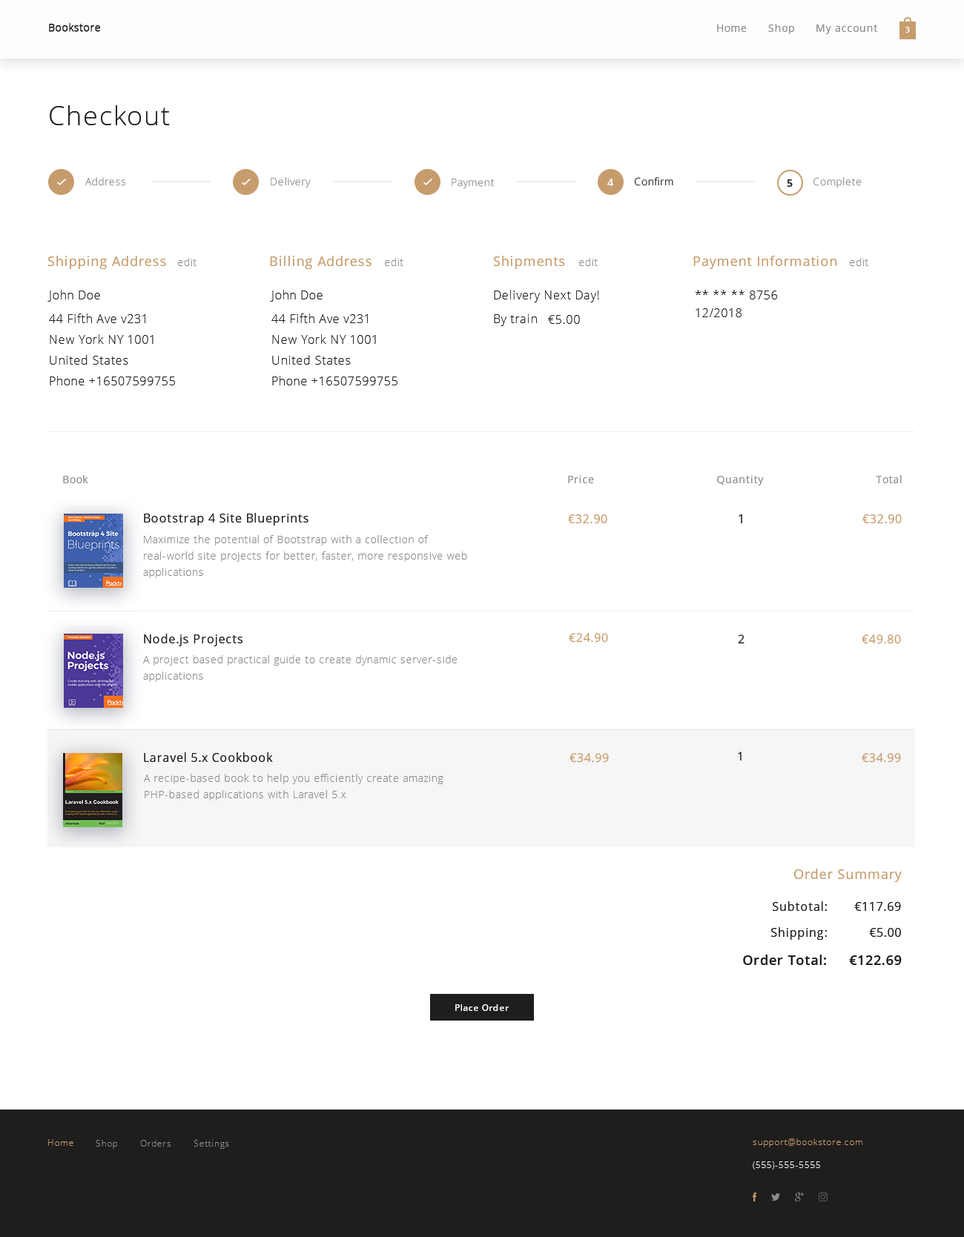
<style>
.page{position:relative;width:964px;height:1237px;background:#ffffff}
.page>*{position:absolute;margin:0}
.t1{font:26.7px "OpenSans-Light";letter-spacing:0.05em;color:#1e1e1c}
.t2{font:10.3px "OpenSans-Light";letter-spacing:0.05em;color:#8c8c8c}
.t3{font:10.4px "OpenSans-Light";letter-spacing:0.05em;color:#8c8c8c}
.t4{font:10.4px "OpenSans-Semibold";letter-spacing:0.05em;color:#fefefc}
.t5{font:10.4px "OpenSans-Light";letter-spacing:0.05em;color:#1e1e1c}
.t6{font:10.4px "OpenSans-Semibold";letter-spacing:0.05em;color:#1e1e1c}
.t7{font:13.3px "OpenSans";letter-spacing:0.05em;color:#c69c6d}
.t8{font:11.9px/20.8px "OpenSans-Light";letter-spacing:0.05em;color:#1e1e1c}
.t9{font:11.9px/23.7px "OpenSans-Light";letter-spacing:0.05em;color:#1e1e1c}
.t10{font:11.9px/17.8px "OpenSans-Light";letter-spacing:0.05em;color:#1e1e1c}
.t11{font:11.9px "OpenSans-Light";letter-spacing:0.05em;color:#1e1e1c}
.t12{font:10.4px "OpenSans";letter-spacing:0.05em;color:#8c8c8c}
.t13{font:11.9px "OpenSans";letter-spacing:0.05em;color:#1e1e1c}
.t14{font:11.9px "OpenSans";letter-spacing:0.05em;color:#c69c6d}
.t15{font:10.4px/16.3px "OpenSans-Light";letter-spacing:0.05em;color:#8c8c8c}
.t16{font:11.8px "OpenSans";letter-spacing:0.05em;color:#c69c6d}
.t17{font:13.3px "OpenSans-Semibold";letter-spacing:0.05em;color:#1e1e1c}
.t18{font:8.9px "OpenSans-Semibold";letter-spacing:0.05em;color:#fffefe}
</style>
<div class="page">
<p class="t1" style="left:50px;top:105px;width:120px;height:20px">Checkout</p>
<p class="t2" style="left:85px;top:177px;width:41px;height:9px">Address</p>
<p class="t3" style="left:271px;top:177px;width:40px;height:11px">Delivery</p>
<p class="t3" style="left:451px;top:178px;width:43px;height:11px">Payment</p>
<p class="t4" style="left:607px;top:179px;width:6px;height:7px">4</p>
<p class="t5" style="left:635px;top:177px;width:38px;height:9px">Confirm</p>
<p class="t6" style="left:787px;top:179px;width:5px;height:8px">5</p>
<p class="t3" style="left:813px;top:177px;width:48px;height:11px">Complete</p>
<p class="t7" style="left:48px;top:256px;width:118px;height:13px">Shipping Address</p>
<p class="t3" style="left:178px;top:258px;width:18px;height:8px">edit</p>
<p class="t7" style="left:270px;top:256px;width:101px;height:13px">Billing Address</p>
<p class="t3" style="left:385px;top:258px;width:18px;height:8px">edit</p>
<p class="t7" style="left:494px;top:256px;width:71px;height:13px">Shipments</p>
<p class="t3" style="left:579px;top:258px;width:19px;height:8px">edit</p>
<p class="t7" style="left:693px;top:256px;width:143px;height:13px">Payment Information</p>
<p class="t3" style="left:850px;top:258px;width:18px;height:8px">edit</p>
<p class="t8" style="left:47px;top:290px;width:128px;height:95px"><span class="t9">John Doe<br>44 Fifth Ave v231<br></span>New York NY 1001<br>United States<br>Phone +16507599755</p>
<p class="t8" style="left:270px;top:290px;width:127px;height:95px"><span class="t9">John Doe<br>44 Fifth Ave v231<br></span>New York NY 1001<br>United States<br>Phone +16507599755</p>
<p class="t10" style="left:494px;top:290px;width:105px;height:36px">Delivery Next Day! <span class="t9"><br>By train</span></p>
<p class="t10" style="left:695px;top:290px;width:82px;height:27px">** ** ** 8756<br>12/2018</p>
<p class="t11" style="left:548px;top:315px;width:32px;height:9px">€5.00</p>
<p class="t12" style="left:63px;top:475px;width:25px;height:8px">Book</p>
<p class="t12" style="left:568px;top:475px;width:26px;height:8px">Price</p>
<p class="t12" style="left:717px;top:475px;width:47px;height:11px">Quantity</p>
<p class="t12" style="left:876px;top:475px;width:25px;height:8px">Total</p>
<p class="t13" style="left:144px;top:513px;width:164px;height:13px">Bootstrap 4 Site Blueprints</p>
<p class="t14" style="left:568px;top:514px;width:39px;height:9px">€32.90</p>
<p class="t13" style="left:738px;top:514px;width:4px;height:9px">1</p>
<p class="t14" style="left:862px;top:514px;width:39px;height:9px">€32.90</p>
<p class="t15" style="left:143px;top:535px;width:324px;height:43px">Maximize the potential of Bootstrap with a collection of real-world site projects for better, faster, more responsive web applications</p>
<p class="t13" style="left:144px;top:634px;width:98px;height:12px">Node.js Projects</p>
<p class="t16" style="left:569px;top:633px;width:39px;height:10px">€24.90</p>
<p class="t13" style="left:738px;top:635px;width:6px;height:9px">2</p>
<p class="t16" style="left:861px;top:635px;width:40px;height:9px">€49.80</p>
<p class="t15" style="left:143px;top:655px;width:314px;height:27px">A project based practical guide to create dynamic server-side applications</p>
<p class="t13" style="left:144px;top:752px;width:129px;height:10px">Laravel 5.x Cookbook</p>
<p class="t16" style="left:569px;top:753px;width:40px;height:10px">€34.99</p>
<p class="t13" style="left:738px;top:752px;width:3px;height:9px">1</p>
<p class="t16" style="left:861px;top:753px;width:40px;height:10px">€34.99</p>
<p class="t15" style="left:144px;top:774px;width:299px;height:27px">A recipe-based book to help you efficiently create amazing PHP-based applications with Laravel 5.x</p>
<p class="t7" style="left:794px;top:869px;width:107px;height:13px">Order Summary</p>
<p class="t13" style="left:772px;top:901px;width:55px;height:10px">Subtotal:</p>
<p class="t13" style="left:854px;top:902px;width:47px;height:9px">€117.69</p>
<p class="t13" style="left:771px;top:927px;width:56px;height:13px">Shipping:</p>
<p class="t13" style="left:869px;top:928px;width:32px;height:9px">€5.00</p>
<p class="t17" style="left:743px;top:955px;width:83px;height:10px">Order Total:</p>
<p class="t17" style="left:849px;top:956px;width:52px;height:9px">€122.69</p>
<p class="t18" style="left:455px;top:1005px;width:54px;height:6px">Place Order</p>
</div>
